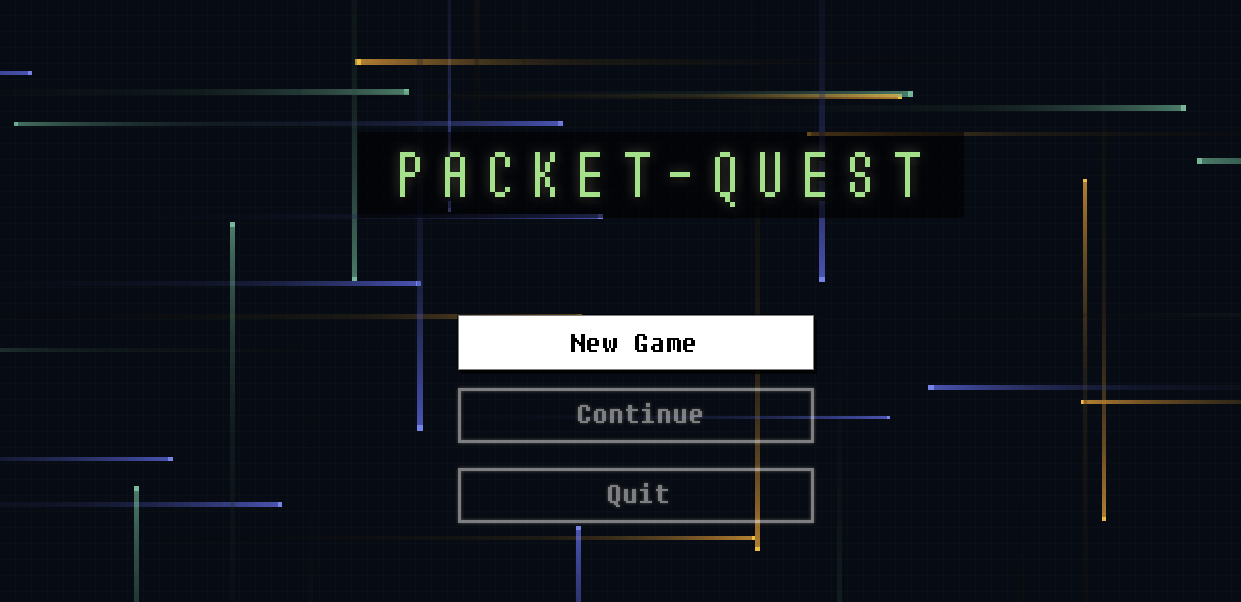
<style>
.page{position:relative;width:1241px;height:602px;background:#070b13}
.page>*{position:absolute;margin:0}
.t1{font:60px "Terminal";color:#a5e18b}
.t2{font:24px "Fixedsys";color:#000000}
.t3{font:24px "Fixedsys";color:#7c7e82}
</style>
<div class="page">
<p class="t1" style="left:400px;top:152px;width:520px;height:55px">PACKET-QUEST</p>
<p class="t2" style="left:571px;top:334px;width:124px;height:18px">New Game</p>
<p class="t3" style="left:578px;top:403px;width:124px;height:20px">Continue</p>
<p class="t3" style="left:608px;top:483px;width:60px;height:24px">Quit</p>
</div>
